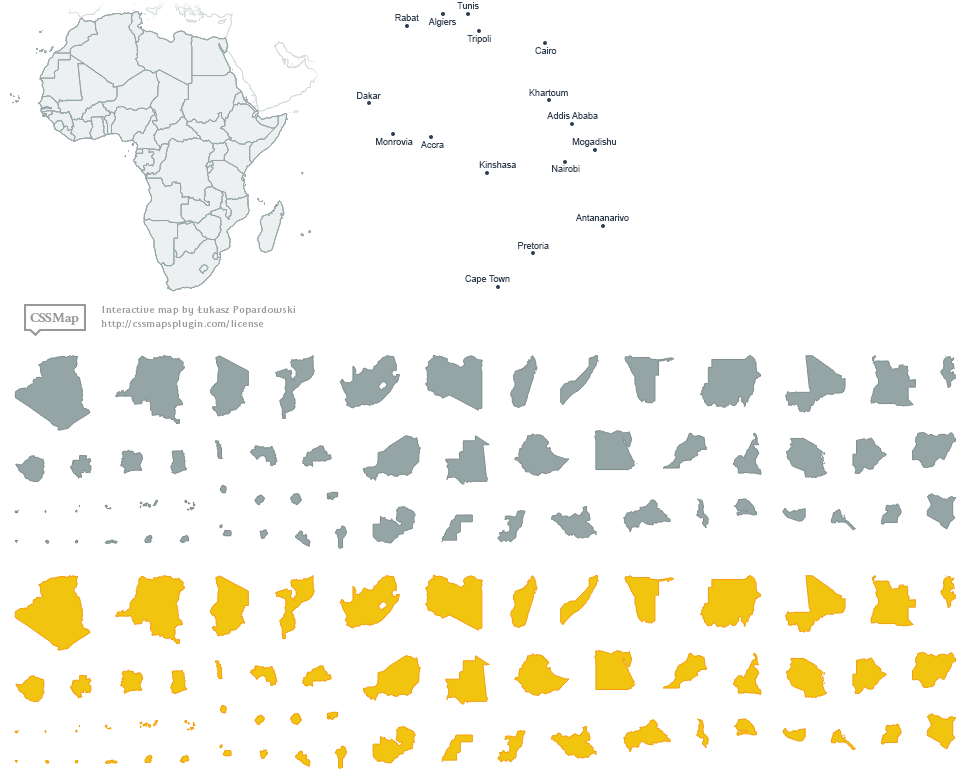
<style>
.page{position:relative;width:971px;height:784px;background:#ffffff}
.page>*{position:absolute;margin:0}
.t1{font:9px "ArialMT";color:#2c3e50}
</style>
<div class="page">
<p class="t1" style="left:457px;top:2px;width:22px;height:7px">Tunis</p>
<p class="t1" style="left:395px;top:14px;width:24px;height:7px">Rabat</p>
<p class="t1" style="left:428px;top:18px;width:29px;height:9px">Algiers</p>
<p class="t1" style="left:467px;top:35px;width:24px;height:9px">Tripoli</p>
<p class="t1" style="left:535px;top:47px;width:22px;height:7px">Cairo</p>
<p class="t1" style="left:529px;top:89px;width:39px;height:7px">Khartoum</p>
<p class="t1" style="left:357px;top:92px;width:24px;height:7px">Dakar</p>
<p class="t1" style="left:547px;top:112px;width:51px;height:7px">Addis Ababa</p>
<p class="t1" style="left:376px;top:138px;width:37px;height:7px">Monrovia</p>
<p class="t1" style="left:420px;top:141px;width:24px;height:7px">Accra</p>
<p class="t1" style="left:572px;top:138px;width:44px;height:9px">Mogadishu</p>
<p class="t1" style="left:479px;top:161px;width:37px;height:7px">Kinshasa</p>
<p class="t1" style="left:552px;top:165px;width:28px;height:7px">Nairobi</p>
<p class="t1" style="left:575px;top:214px;width:54px;height:7px">Antananarivo</p>
<p class="t1" style="left:518px;top:242px;width:31px;height:7px">Pretoria</p>
<p class="t1" style="left:465px;top:275px;width:45px;height:9px">Cape Town</p>
</div>
